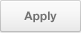
<style>
.page{position:relative;width:81px;height:33px}
.page>*{position:absolute;margin:0}
.t1{font:12px "HelveticaNeue-Bold";color:#717171}
</style>
<div class="page">
<p class="t1" style="left:24px;top:11px;width:33px;height:12px">Apply</p>
</div>
